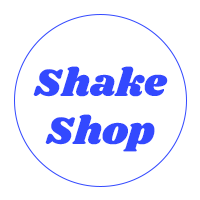
<style>
.page{position:relative;width:200px;height:200px;background:#ffffff}
.page>*{position:absolute;margin:0}
.t1{font:40px "Shrikhand-Regular";color:#3349ff}
</style>
<div class="page">
<p class="t1" style="left:33px;top:66px;width:135px;height:86px;text-align:center">Shake Shop</p>
</div>
